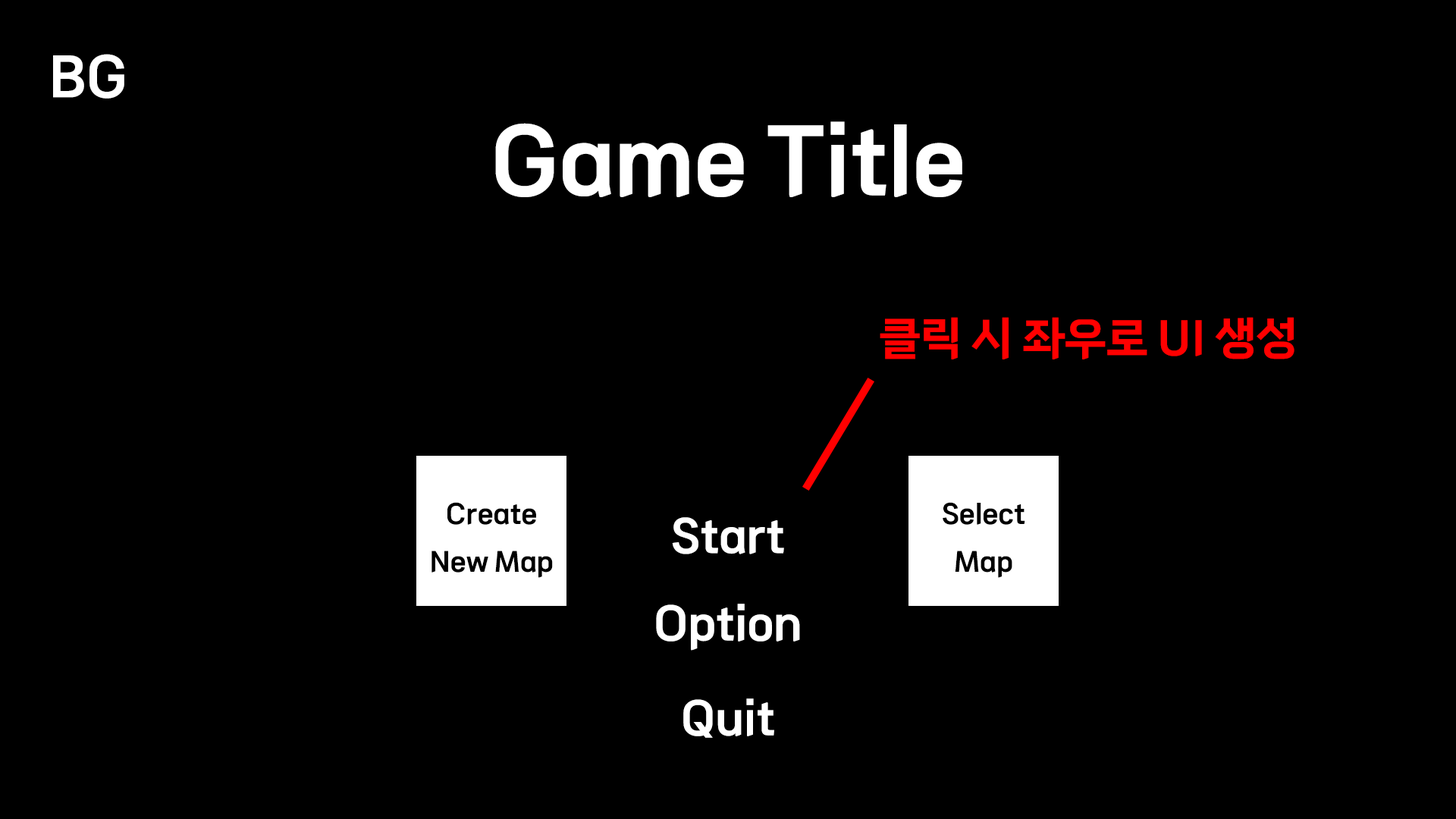
<style>
.page{position:relative;width:1456px;height:819px;background:#000000}
.page>*{position:absolute;margin:0}
.t1{font:54.6px "TheJamsilOTF4Medium";color:#ffffff}
.t2{font:91px "TheJamsilOTF4Medium";color:#ffffff}
.t3{font:45.5px "TheJamsilOTF4Medium";color:#ff0000}
.t4{font:27.3px "TheJamsilOTF4Medium";color:#000000}
.t5{font:45.5px "TheJamsilOTF4Medium";color:#ffffff}
</style>
<div class="page">
<p class="t1" style="left:53px;top:54px;width:71px;height:45px">BG</p>
<p class="t2" style="left:495px;top:121px;width:467px;height:76px">Game Title</p>
<p class="t3" style="left:880px;top:317px;width:414px;height:42px">클릭 시 좌우로 UI 생성</p>
<p class="t4" style="left:431px;top:502px;width:122px;height:76px;text-align:center">Create New Map</p>
<p class="t4" style="left:943px;top:502px;width:82px;height:76px;text-align:center">Select<br>Map</p>
<p class="t5" style="left:672px;top:517px;width:112px;height:37px">Start</p>
<p class="t5" style="left:656px;top:604px;width:144px;height:47px">Option</p>
<p class="t5" style="left:683px;top:698px;width:91px;height:40px">Quit</p>
</div>
